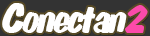
<style>
.page{position:relative;width:150px;height:36px;background:#ffffff}
.page>*{position:absolute;margin:0}
.t1{font:41.4px "MANDELA";letter-spacing:-0.04em;color:#ffffff;scale:1.16 1}
.t2{font:41.4px "MANDELA";letter-spacing:-0.04em;color:#fc4aaa;scale:1.16 1}
</style>
<div class="page">
<p class="t1" style="left:2px;top:3px;width:146px;height:30px">Conectan<span class="t2">2</span></p>
</div>
